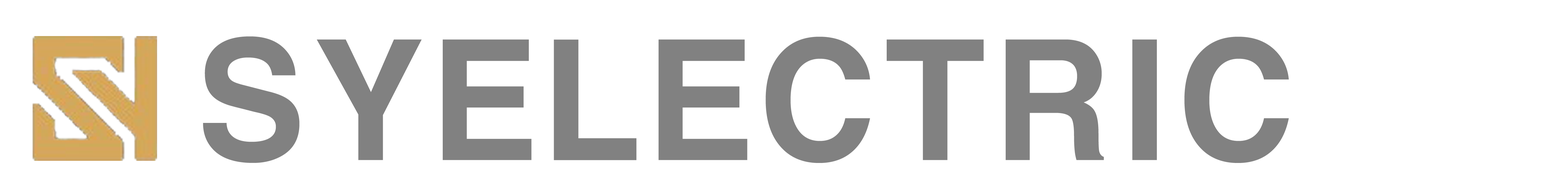
<style>
.page{position:relative;width:1568px;height:191px;background:#ffffff}
.page>*{position:absolute;margin:0}
.t1{font:157.1px "H2gtrE";color:#818181}
</style>
<div class="page">
<p class="t1" style="left:203px;top:36px;width:1086px;height:127px">SYELECTRIC</p>
</div>
